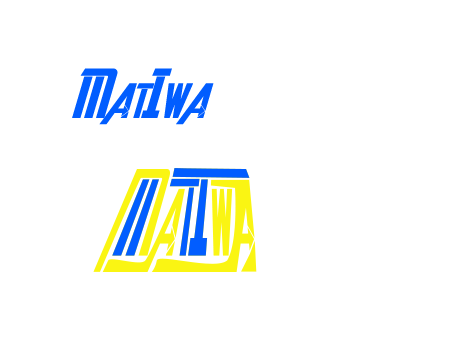
<style>
.page{position:relative;width:454px;height:340px;background:#ffffff}
.page>*{position:absolute;margin:0}
.t1{font:48px "AvengeanceHeroicAvengerNormal";color:#015dff;font-variant:small-caps}
</style>
<div class="page">
<p class="t1" style="left:72px;top:68px;width:142px;height:57px">MatIwa</p>
</div>
